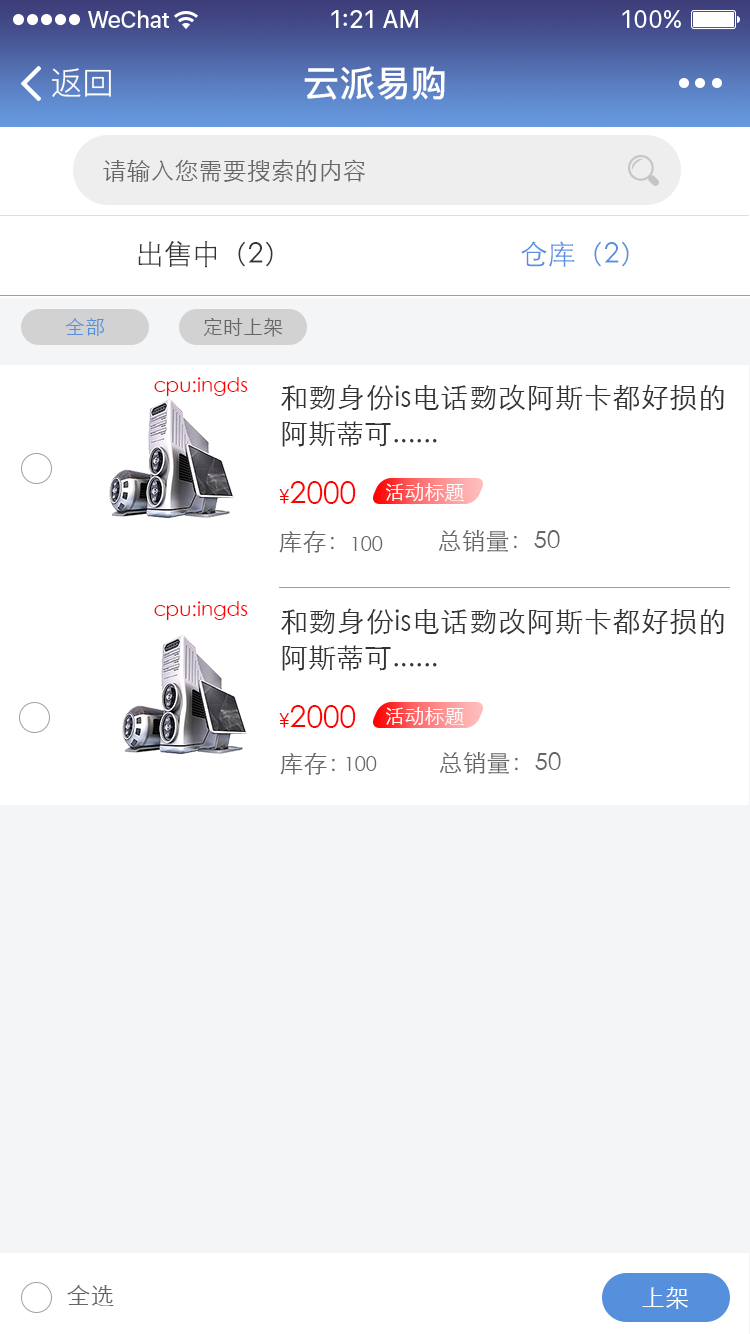
<style>
.page{position:relative;width:750px;height:1334px;background:#ffffff}
.page>*{position:absolute;margin:0}
.t1{font:32px "PingFang-SC-Regular";color:#ffffff}
.t2{font:36px "PingFang-SC-Bold";color:#ffffff}
.t3{font:24px "STXihei";color:#666666}
.t4{font:28px "STXihei";color:#333333}
.t5{font:28px "STXihei";color:#568fdc}
.t6{font:20px "STXihei";color:#568fdc}
.t7{font:20px "STXihei";color:#666666}
.t8{font:20px "STXihei";color:#ff0000}
.t9{font:28px/36px "STXihei";color:#333333}
.t10{font:30px "STXihei";color:#ff0000}
.t11{font:20px "STXihei";color:#ffffff}
.t12{font:24px "STXihei";color:#ffffff}
</style>
<div class="page">
<p class="t1" style="left:52px;top:68px;width:59px;height:29px">返回</p>
<p class="t2" style="left:304px;top:66px;width:141px;height:34px">云派易购</p>
<p class="t3" style="left:103px;top:159px;width:262px;height:23px">请输入您需要搜索的内容</p>
<p class="t4" style="left:138px;top:240px;width:135px;height:28px">出售中（2）</p>
<p class="t5" style="left:521px;top:241px;width:108px;height:26px">仓库（2）</p>
<p class="t6" style="left:65px;top:318px;width:39px;height:18px">全部</p>
<p class="t7" style="left:203px;top:317px;width:80px;height:20px">定时上架</p>
<p class="t8" style="left:154px;top:377px;width:94px;height:19px">cpu:ingds</p>
<p class="t9" style="left:281px;top:384px;width:443px;height:63px;text-align:justify">和覅身份is电话覅改阿斯卡都好损的阿斯蒂可......</p>
<p class="t10" style="left:279px;top:481px;width:77px;height:23px"><span class="t8">¥</span>2000</p>
<p class="t11" style="left:386px;top:483px;width:78px;height:19px">活动标题</p>
<p class="t3" style="left:279px;top:531px;width:55px;height:22px">库存：</p>
<p class="t3" style="left:438px;top:530px;width:122px;height:22px">总销量：50</p>
<p class="t7" style="left:352px;top:536px;width:31px;height:15px">100</p>
<p class="t8" style="left:154px;top:601px;width:94px;height:19px">cpu:ingds</p>
<p class="t9" style="left:281px;top:608px;width:443px;height:63px;text-align:justify">和覅身份is电话覅改阿斯卡都好损的阿斯蒂可......</p>
<p class="t10" style="left:279px;top:705px;width:77px;height:23px"><span class="t8">¥</span>2000</p>
<p class="t11" style="left:386px;top:707px;width:78px;height:19px">活动标题</p>
<p class="t3" style="left:280px;top:753px;width:55px;height:22px">库存：</p>
<p class="t7" style="left:346px;top:756px;width:31px;height:15px">100</p>
<p class="t3" style="left:439px;top:752px;width:122px;height:22px">总销量：50</p>
<p class="t3" style="left:67px;top:1285px;width:47px;height:21px">全选</p>
<p class="t12" style="left:642px;top:1286px;width:46px;height:23px">上架</p>
</div>
